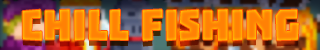
<style>
.page{position:relative;width:320px;height:50px}
.page>*{position:absolute;margin:0}
.t1{font:48px "Troika";color:#ff8105}
</style>
<div class="page">
<p class="t1" style="left:22px;top:9px;width:277px;height:32px">Chill fishing</p>
</div>
